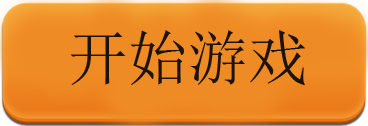
<style>
.page{position:relative;width:368px;height:126px;background:#ef8b24}
.page>*{position:absolute;margin:0}
.t1{font:60px "SimSun";color:#1c140c}
</style>
<div class="page">
<p class="t1" style="left:70px;top:30px;width:236px;height:55px">开始游戏</p>
</div>
